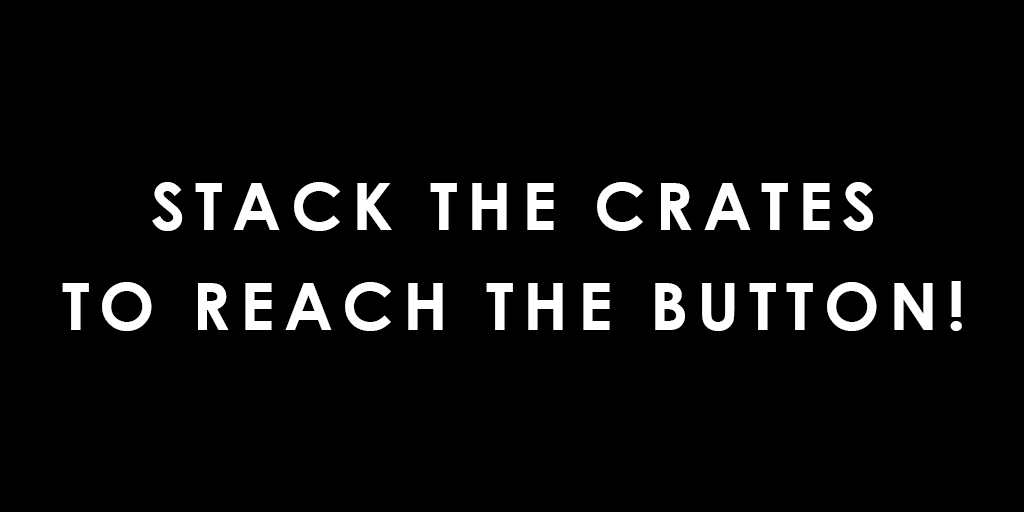
<style>
.page{position:relative;width:1024px;height:512px;background:#000000}
.page>*{position:absolute;margin:0}
.t1{font:65.5px/100px "CenturyGothic-Bold";letter-spacing:0.15em;color:#ffffff}
</style>
<div class="page">
<p class="t1" style="left:62px;top:182px;width:900px;height:149px;text-align:center">STACK THE CRATES<br>TO REACH THE BUTTON!</p>
</div>
